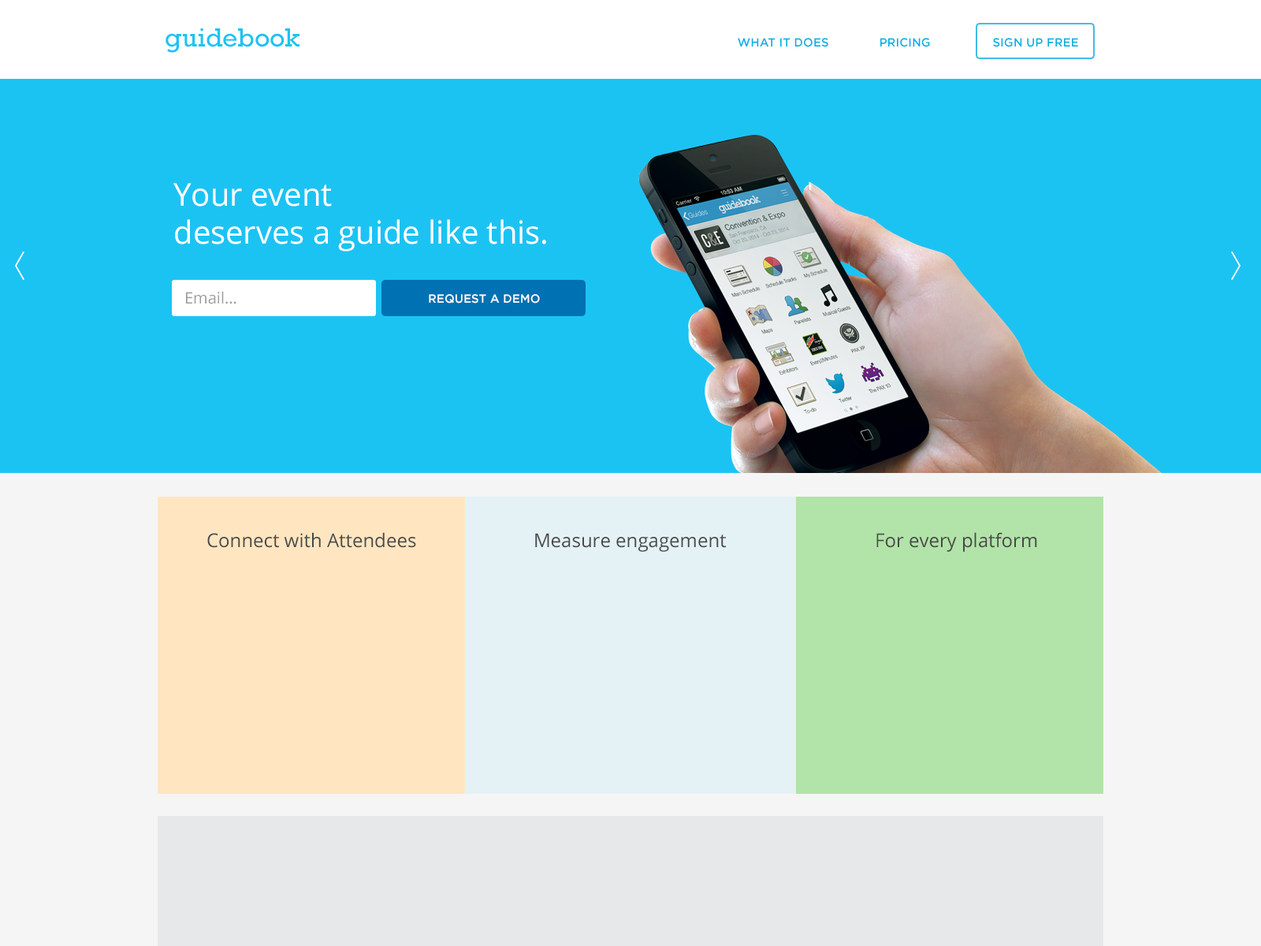
<style>
.page{position:relative;width:1261px;height:946px;background:#1bc3f3}
.page>*{position:absolute;margin:0}
.t1{font:26.8px "Rockwell";color:#1bc3f3}
.t2{font:26.8px "Rockwell";letter-spacing:0.025em;color:#1bc3f3}
.t3{font:26.8px "Rockwell";letter-spacing:-0.005em;color:#1bc3f3}
.t4{font:26.8px "Rockwell";letter-spacing:-0.025em;color:#1bc3f3}
.t5{font:26.8px "Rockwell";letter-spacing:-0.01em;color:#1bc3f3}
.t6{font:11.8px "Gotham-Medium";color:#00b0e2}
.t7{font:31.5px "OpenSans";color:#ffffff}
.t8{font:15.8px "OpenSans";color:#9a9a9a}
.t9{font:11.8px "Gotham-Medium";color:#ffffff}
.t10{font:18.9px "OpenSans";color:#494949}
</style>
<div class="page">
<p class="t1" style="left:165px;top:28px;width:134px;height:25px"><span class="t2">gu</span>ideb<span class="t3">o</span><span class="t4">o</span><span class="t5">k</span></p>
<p class="t6" style="left:738px;top:38px;width:340px;height:9px">WHAT IT DOES  PRICING   SIGN UP FREE</p>
<p class="t7" style="left:173px;top:183px;width:373px;height:68px">Your event<br>deserves a guide like this.</p>
<p class="t8" style="left:186px;top:291px;width:50px;height:13px">Email...</p>
<p class="t9" style="left:429px;top:294px;width:111px;height:9px">REQUEST A DEMO</p>
<p class="t10" style="left:207px;top:532px;width:209px;height:16px">Connect with Attendees</p>
<p class="t10" style="left:535px;top:533px;width:191px;height:19px">Measure engagement</p>
<p class="t10" style="left:876px;top:532px;width:161px;height:20px">For every platform</p>
</div>
